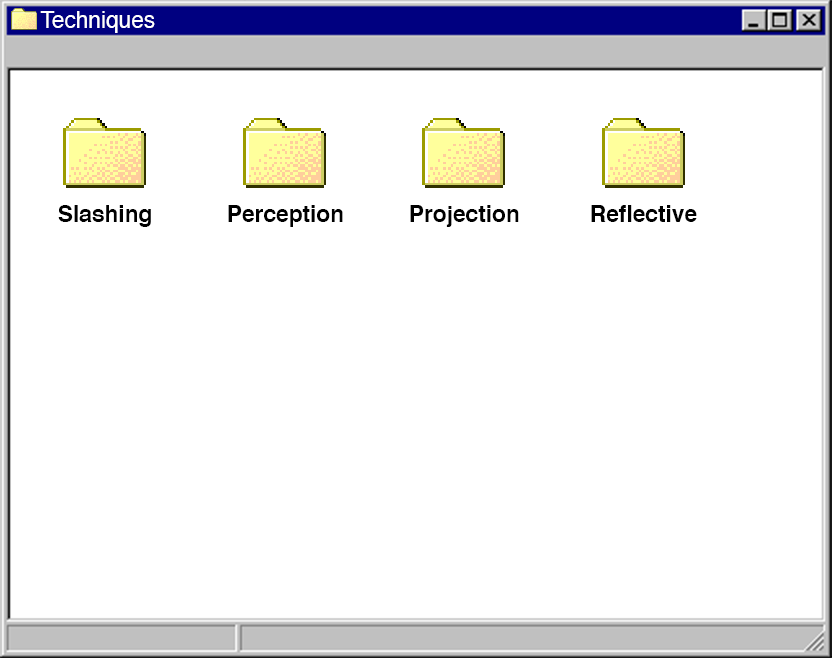
<style>
.page{position:relative;width:832px;height:658px;background:#ffffff}
.page>*{position:absolute;margin:0}
.t1{font:22.7px "Helvetica";color:#ffffff}
.t2{font:22.7px "Helvetica-Bold";color:#000000}
</style>
<div class="page">
<p class="t1" style="left:40px;top:11px;width:115px;height:22px">Techniques</p>
<p class="t2" style="left:58px;top:205px;width:93px;height:22px">Slashing</p>
<p class="t2" style="left:228px;top:205px;width:115px;height:22px">Perception</p>
<p class="t2" style="left:410px;top:205px;width:109px;height:22px">Projection</p>
<p class="t2" style="left:591px;top:205px;width:106px;height:17px">Reflective</p>
</div>
